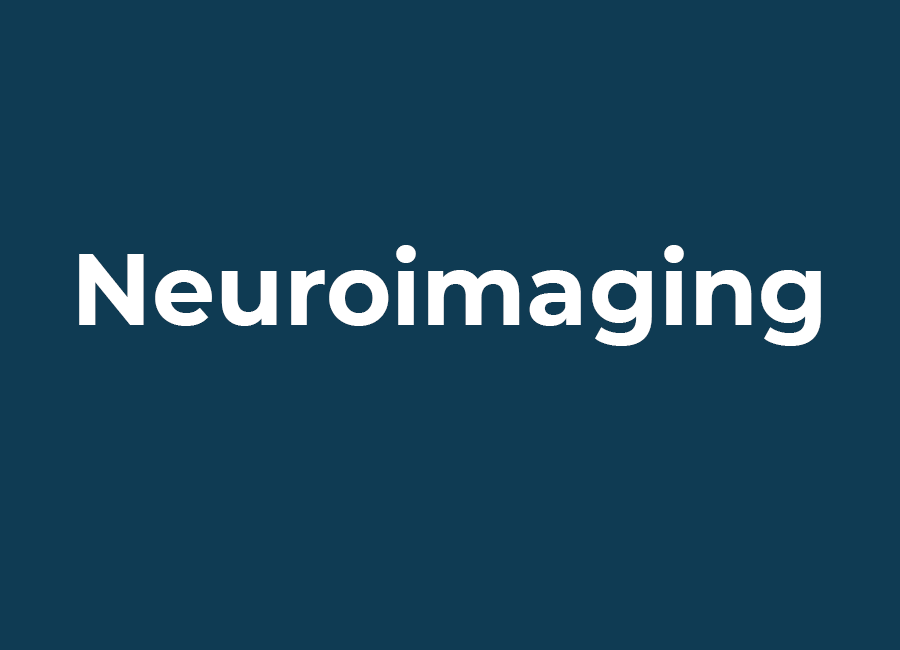
<style>
.page{position:relative;width:900px;height:650px;background:#0f3b53}
.page>*{position:absolute;margin:0}
.t1{font:100px "Montserrat-Bold";color:#ffffff}
</style>
<div class="page">
<p class="t1" style="left:79px;top:245px;width:742px;height:101px">Neuroimaging</p>
</div>
